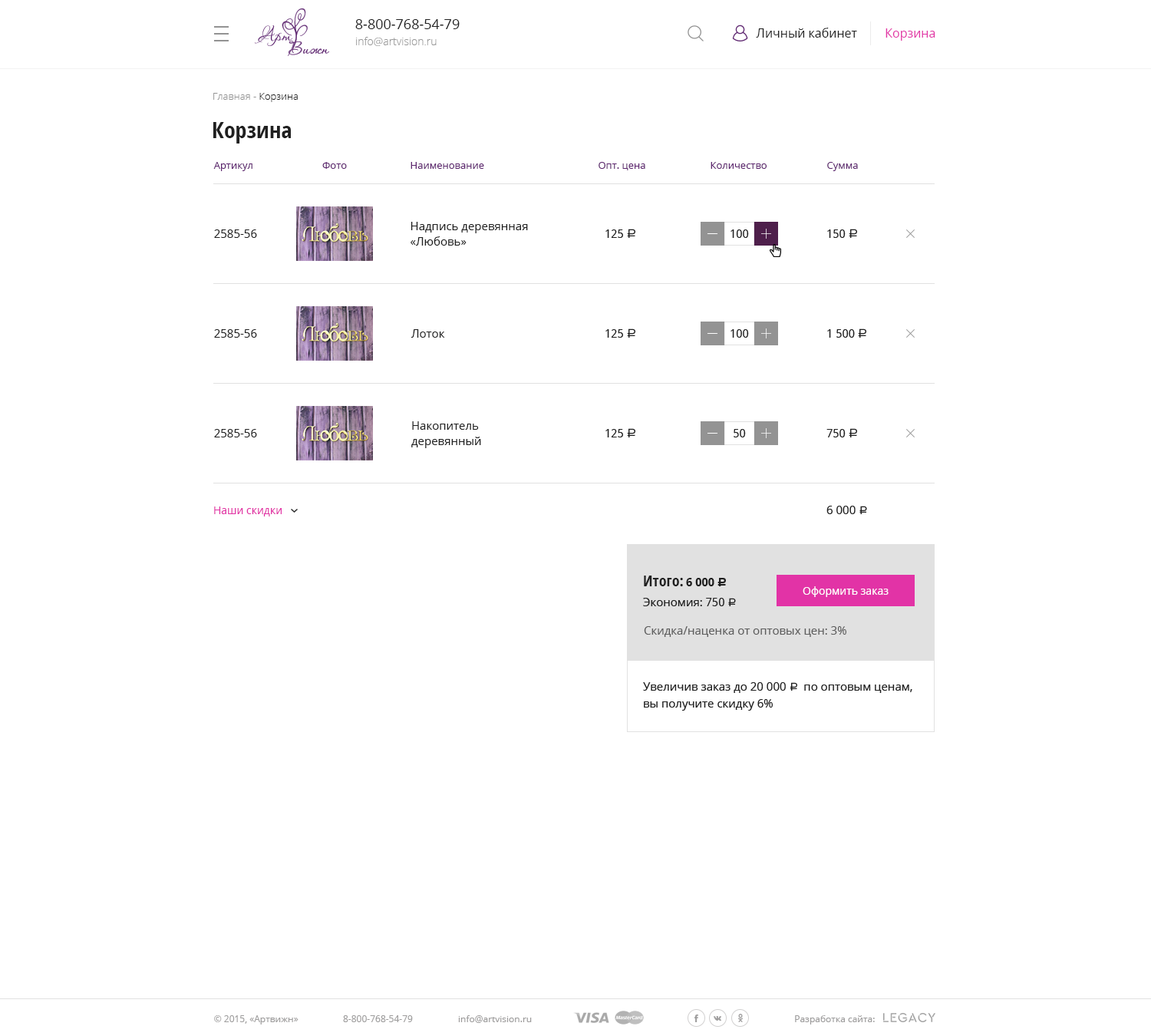
<style>
.page{position:relative;width:1151px;height:1036px;background:#ffffff}
.page>*{position:absolute;margin:0}
.t1{font:13.8px "OpenSans";color:#202020}
.t2{font:12.3px "OpenSans";color:#202020}
.t3{font:12.3px "OpenSans";color:#e233a6}
.t4{font:10.7px "OpenSans-Light";color:#999999}
.t5{font:10px "OpenSans-Light";color:#939393}
.t6{font:10px "OpenSans-Light";color:#202020}
.t7{font:23px "OpenSans-CondensedBold";color:#202020}
.t8{font:10px "OpenSans";color:#5e2670}
.t9{font:11.5px/15.3px "OpenSans";color:#202020}
.t10{font:11.5px "OpenSans";color:#202020}
.t11{font:11.5px "DroidSans";color:#202020}
.t12{font:12.3px "ALSRubl";color:#202020}
.t13{font:10.7px "OpenSans";color:#e233a6}
.t14{font:11.5px "ALSRubl";color:#202020}
.t15{font:15.3px "OpenSans-CondensedBold";color:#202020}
.t16{font:11.5px "DroidSans-Bold";color:#1f1f1f}
.t17{font:12.3px "ALSRubl";color:#1f1f1f}
.t18{font:10.7px "OpenSans";color:#ffffff}
.t19{font:11.5px "OpenSans";color:#5d5d5d}
.t20{font:11.5px/16.9px "OpenSans";color:#202020}
.t21{font:11.5px/16.9px "ALSRubl";color:#202020}
.t22{font:9.2px "OpenSans";color:#9e9d9d}
</style>
<div class="page">
<p class="t1" style="left:355px;top:19px;width:105px;height:10px">8-800-768-54-79</p>
<p class="t2" style="left:756px;top:28px;width:101px;height:10px">Личный кабинет</p>
<p class="t3" style="left:886px;top:28px;width:49px;height:13px">Корзина</p>
<p class="t4" style="left:356px;top:37px;width:81px;height:9px">info@artvision.ru</p>
<p class="t5" style="left:213px;top:93px;width:85px;height:9px">Главная - <span class="t6">Корзина</span></p>
<p class="t7" style="left:213px;top:122px;width:78px;height:21px">Корзина</p>
<p class="t8" style="left:213px;top:162px;width:39px;height:9px">Артикул</p>
<p class="t8" style="left:322px;top:162px;width:25px;height:7px">Фото</p>
<p class="t8" style="left:411px;top:162px;width:73px;height:7px">Наименование</p>
<p class="t8" style="left:599px;top:162px;width:46px;height:8px">Опт. цена</p>
<p class="t8" style="left:711px;top:162px;width:56px;height:7px">Количество</p>
<p class="t8" style="left:827px;top:162px;width:31px;height:9px">Сумма</p>
<p class="t9" style="left:411px;top:222px;width:117px;height:24px">Надпись деревянная <br>«Любовь»</p>
<p class="t10" style="left:214px;top:229px;width:43px;height:9px">2585-56</p>
<p class="t11" style="left:605px;top:229px;width:30px;height:9px">125 <span class="t12">a</span></p>
<p class="t11" style="left:731px;top:229px;width:18px;height:9px">100</p>
<p class="t11" style="left:827px;top:229px;width:30px;height:9px">150 <span class="t12">a</span></p>
<p class="t10" style="left:214px;top:329px;width:43px;height:9px">2585-56</p>
<p class="t10" style="left:411px;top:329px;width:34px;height:9px">Лоток</p>
<p class="t11" style="left:605px;top:328px;width:30px;height:10px">125 <span class="t12">a</span></p>
<p class="t11" style="left:731px;top:329px;width:18px;height:9px">100</p>
<p class="t11" style="left:827px;top:328px;width:39px;height:10px">1 500 <span class="t12">a</span></p>
<p class="t9" style="left:411px;top:421px;width:70px;height:27px">Накопитель<br>деревянный</p>
<p class="t10" style="left:214px;top:429px;width:43px;height:8px">2585-56</p>
<p class="t11" style="left:605px;top:428px;width:30px;height:9px">125 <span class="t12">a</span></p>
<p class="t11" style="left:734px;top:429px;width:12px;height:8px">50</p>
<p class="t11" style="left:826px;top:428px;width:31px;height:9px">750 <span class="t12">a</span></p>
<p class="t13" style="left:214px;top:506px;width:68px;height:10px">Наши скидки</p>
<p class="t10" style="left:826px;top:506px;width:41px;height:8px">6 000 <span class="t14">a</span></p>
<p class="t15" style="left:644px;top:576px;width:39px;height:10px">Итого:</p>
<p class="t16" style="left:686px;top:578px;width:40px;height:8px">6 000 <span class="t17">c</span></p>
<p class="t18" style="left:803px;top:586px;width:86px;height:11px">Оформить заказ</p>
<p class="t10" style="left:643px;top:598px;width:93px;height:8px">Экономия: <span class="t11">750 </span><span class="t14">a</span></p>
<p class="t19" style="left:644px;top:626px;width:202px;height:11px">Скидка/наценка от оптовых цен: 3%</p>
<p class="t20" style="left:643px;top:682px;width:269px;height:29px">Увеличив заказ до 20 000 <span class="t21">a </span>по оптовым ценам, <br>вы получите скидку 6%</p>
<p class="t22" style="left:214px;top:1015px;width:85px;height:9px">© 2015, «Артвижн»</p>
<p class="t22" style="left:343px;top:1015px;width:70px;height:7px">8-800-768-54-79</p>
<p class="t22" style="left:458px;top:1015px;width:74px;height:8px">info@artvision.ru</p>
<p class="t22" style="left:795px;top:1015px;width:80px;height:9px">Разработка сайта:</p>
</div>
